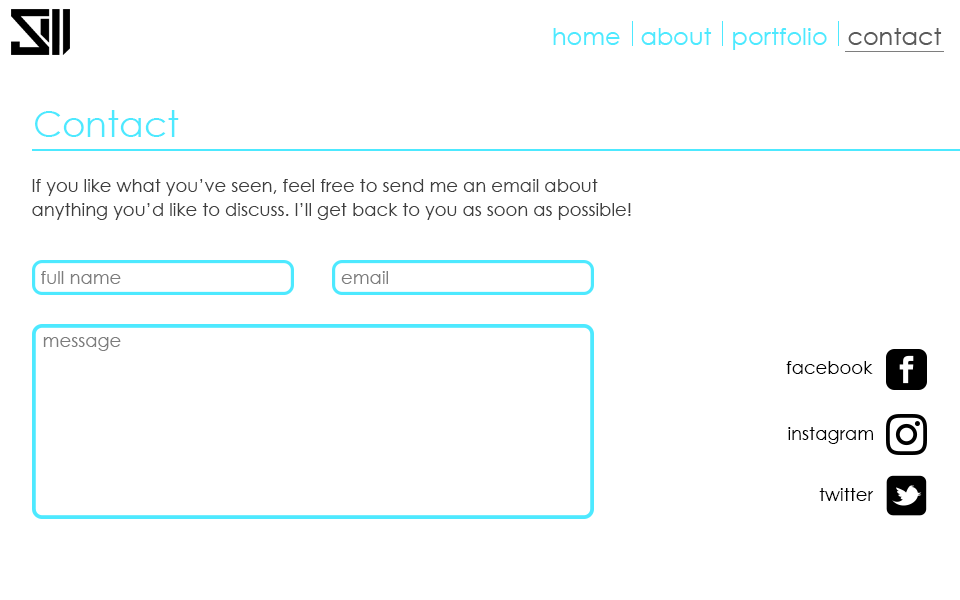
<style>
.page{position:relative;width:960px;height:600px;background:#ffffff}
.page>*{position:absolute;margin:0}
.t1{font:36px "CenturyGothic";color:#4de9ff}
.t2{font:18px/24px "CenturyGothic";color:#3f3f3f}
.t3{font:18px "CenturyGothic";color:#7d7d7d}
.t4{font:18px "CenturyGothic";color:#010101}
.t5{font:18px "CenturyGothic";color:#000000}
</style>
<div class="page">
<p class="t1" style="left:35px;top:110px;width:144px;height:27px">Contact</p>
<p class="t2" style="left:32px;top:179px;width:599px;height:41px">If you like what you’ve seen, feel free to send me an email about <br>anything you’d like to discuss. I’ll get back to you as soon as possible!</p>
<p class="t3" style="left:41px;top:271px;width:80px;height:13px">full name</p>
<p class="t3" style="left:341px;top:271px;width:47px;height:13px">email</p>
<p class="t3" style="left:43px;top:337px;width:78px;height:14px">message</p>
<p class="t4" style="left:786px;top:361px;width:87px;height:13px">facebook</p>
<p class="t5" style="left:788px;top:427px;width:85px;height:17px">instagram</p>
<p class="t5" style="left:819px;top:488px;width:55px;height:13px">twitter</p>
</div>
